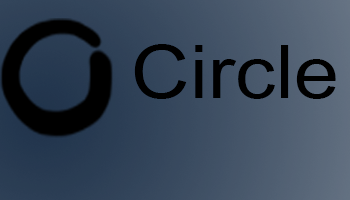
<style>
.page{position:relative;width:350px;height:200px}
.page>*{position:absolute;margin:0}
.t1{font:74.1px "ArialNarrow";color:#000000;scale:1.34 1}
</style>
<div class="page">
<p class="t1" style="left:134px;top:44px;width:202px;height:55px">Circle</p>
</div>
